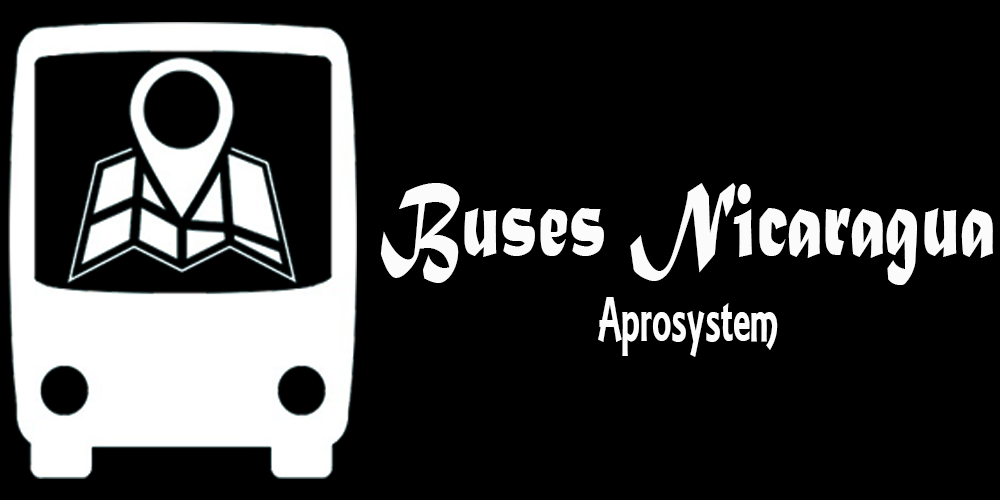
<style>
.page{position:relative;width:1000px;height:500px;background:#000000}
.page>*{position:absolute;margin:0}
.t1{font:110px "MaturaMTScriptCapitals";color:#fcfbfb;scale:0.67 1}
.t2{font:66.5px "ARESSENCE";color:#fdfcfc;scale:0.67 1}
</style>
<div class="page">
<p class="t1" style="left:380px;top:183px;width:613px;height:102px">Buses Nicaragua</p>
<p class="t2" style="left:598px;top:297px;width:180px;height:60px">Aprosystem</p>
</div>
